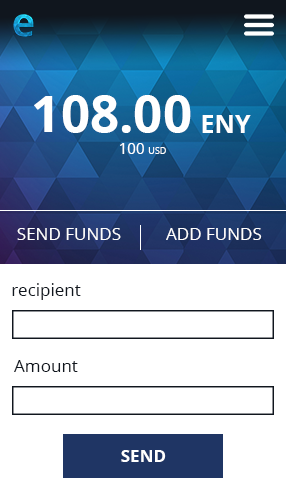
<style>
.page{position:relative;width:286px;height:503px;background:#ffffff}
.page>*{position:absolute;margin:0}
.t1{font:51px "OpenSans-Bold";color:#ffffff}
.t2{font:25px "OpenSans-Bold";color:#ffffff}
.t3{font:15px "OpenSans";color:#ffffff}
.t4{font:9px "OpenSans";color:#ffffff}
.t5{font:17px "OpenSans";color:#ffffff}
.t6{font:17px "OpenSans";color:#10161e}
.t7{font:17px "OpenSans-Bold";color:#ffffff}
</style>
<div class="page">
<p class="t1" style="left:34px;top:95px;width:157px;height:38px">108.00</p>
<p class="t2" style="left:202px;top:115px;width:49px;height:18px">ENY</p>
<p class="t3" style="left:120px;top:143px;width:46px;height:11px">100 <span class="t4">USD</span></p>
<p class="t5" style="left:17px;top:228px;width:104px;height:12px">SEND FUNDS</p>
<p class="t5" style="left:166px;top:228px;width:96px;height:12px">ADD FUNDS</p>
<p class="t6" style="left:12px;top:283px;width:69px;height:17px">recipient</p>
<p class="t6" style="left:14px;top:360px;width:64px;height:12px">Amount</p>
<p class="t7" style="left:121px;top:450px;width:45px;height:12px">SEND</p>
</div>
